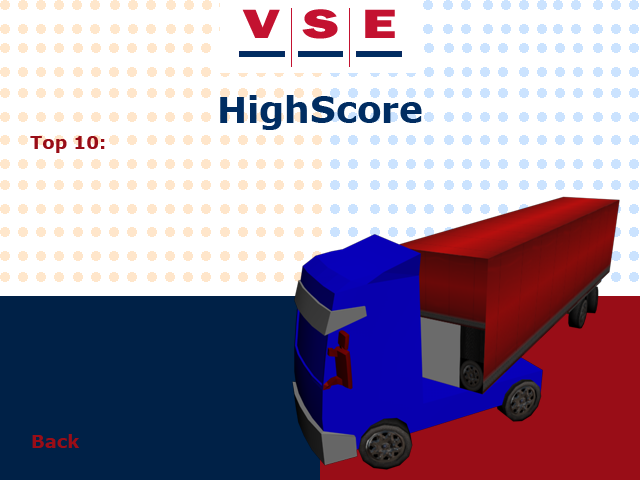
<style>
.page{position:relative;width:640px;height:480px;background:#ffffff}
.page>*{position:absolute;margin:0}
.t1{font:36px "Verdana-Bold";color:#002d62}
.t2{font:18px "Verdana-Bold";color:#990e17}
</style>
<div class="page">
<p class="t1" style="left:220px;top:95px;width:202px;height:35px">HighScore</p>
<p class="t2" style="left:30px;top:136px;width:75px;height:17px">Top 10:</p>
<p class="t2" style="left:32px;top:434px;width:48px;height:14px">Back</p>
</div>
